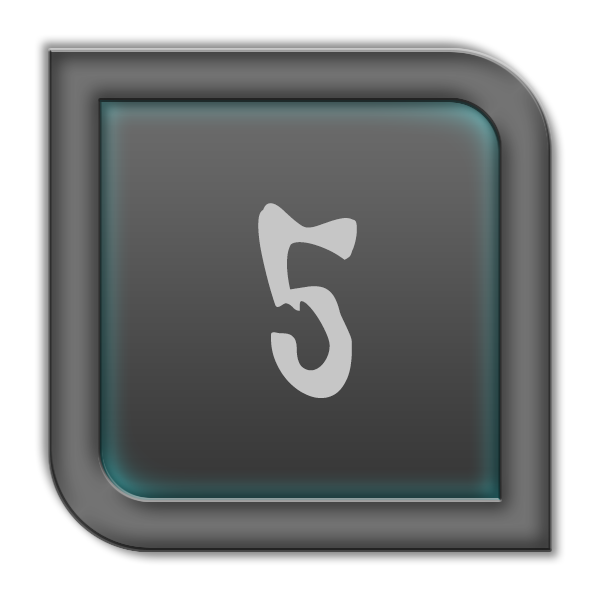
<style>
.page{position:relative;width:600px;height:600px;background:#ffffff}
.page>*{position:absolute;margin:0}
.t1{font:300px "WILD2GhixmNC";color:#c6c6c6;scale:0.83 1}
</style>
<div class="page">
<p class="t1" style="left:258px;top:203px;width:99px;height:195px">5</p>
</div>
